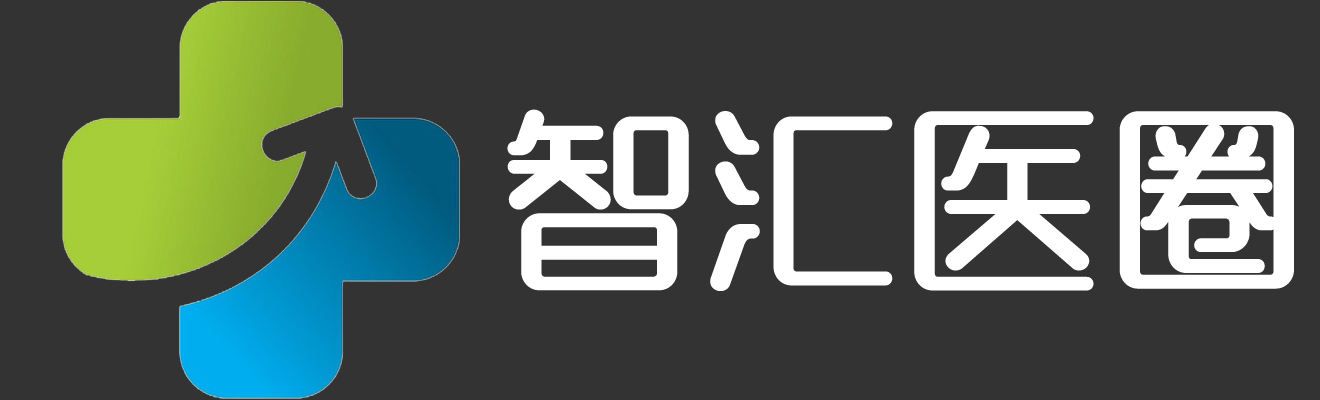
<style>
.page{position:relative;width:1320px;height:400px;background:#333333}
.page>*{position:absolute;margin:0}
.t1{font:180px "MFYaYuan_Noncommercial-Regular";letter-spacing:0.1em;color:#ffffff;font-weight:bold}
</style>
<div class="page">
<p class="t1" style="left:507px;top:109px;width:787px;height:182px">智汇医圈</p>
</div>
